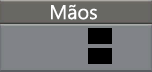
<style>
.page{position:relative;width:152px;height:72px;background:#818388}
.page>*{position:absolute;margin:0}
.t1{font:20px "YuGothicUI-Regular";color:#ffffff}
</style>
<div class="page">
<p class="t1" style="left:51px;top:4px;width:46px;height:16px">Mãos</p>
</div>
